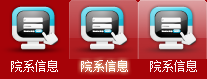
<style>
.page{position:relative;width:207px;height:79px;background:#a60308}
.page>*{position:absolute;margin:0}
.t1{font:12px "NSimSun";color:#fdfafa}
</style>
<div class="page">
<p class="t1" style="left:11px;top:60px;width:47px;height:12px">院系信息</p>
<p class="t1" style="left:81px;top:60px;width:47px;height:12px">院系信息</p>
<p class="t1" style="left:150px;top:60px;width:47px;height:12px">院系信息</p>
</div>
